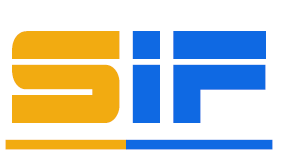
<style>
.page{position:relative;width:282px;height:162px;background:#ffffff}
.page>*{position:absolute;margin:0}
.t1{font:192.6px "voxBOXLaser";color:#0f69e3;text-decoration:underline;scale:0.93 1}
.t2{font:139.1px "QuantumRegular";color:#282828;scale:0.93 1}
.t3{font:192.6px "voxBOXLaser";color:#f2ab11;text-decoration:underline;scale:0.93 1}
</style>
<div class="page">
<p class="t1" style="left:5px;top:31px;width:268px;height:119px"><span class="t2"><br></span><span class="t3">s</span>if</p>
</div>
